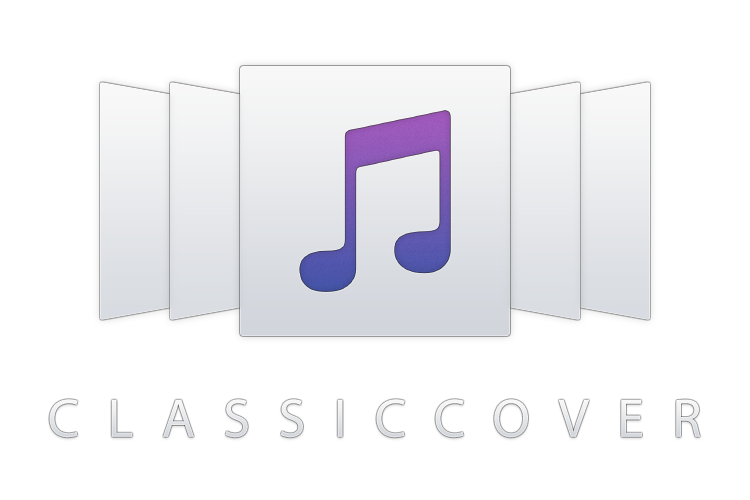
<style>
.page{position:relative;width:750px;height:500px;background:#ffffff}
.page>*{position:absolute;margin:0}
.t1{font:55px "MyriadPro-Regular";letter-spacing:0.51em;color:#e8e9ec;text-transform:uppercase}
</style>
<div class="page">
<p class="t1" style="left:49px;top:399px;width:652px;height:39px">ClassicCover</p>
</div>
